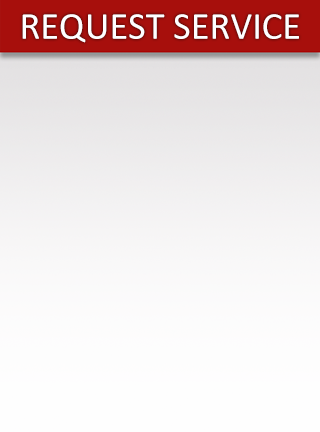
<style>
.page{position:relative;width:320px;height:432px}
.page>*{position:absolute;margin:0}
.t1{font:38.4px "Calibri";color:#fffeff}
</style>
<div class="page">
<p class="t1" style="left:22px;top:14px;width:277px;height:29px">REQUEST SERVICE</p>
</div>
